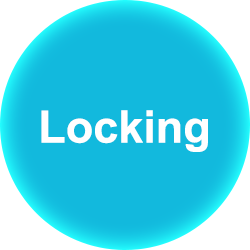
<style>
.page{position:relative;width:250px;height:250px;background:#12b9dd}
.page>*{position:absolute;margin:0}
.t1{font:45px "Arial-BoldMT";color:#ffffff}
</style>
<div class="page">
<p class="t1" style="left:41px;top:110px;width:167px;height:42px">Locking</p>
</div>
